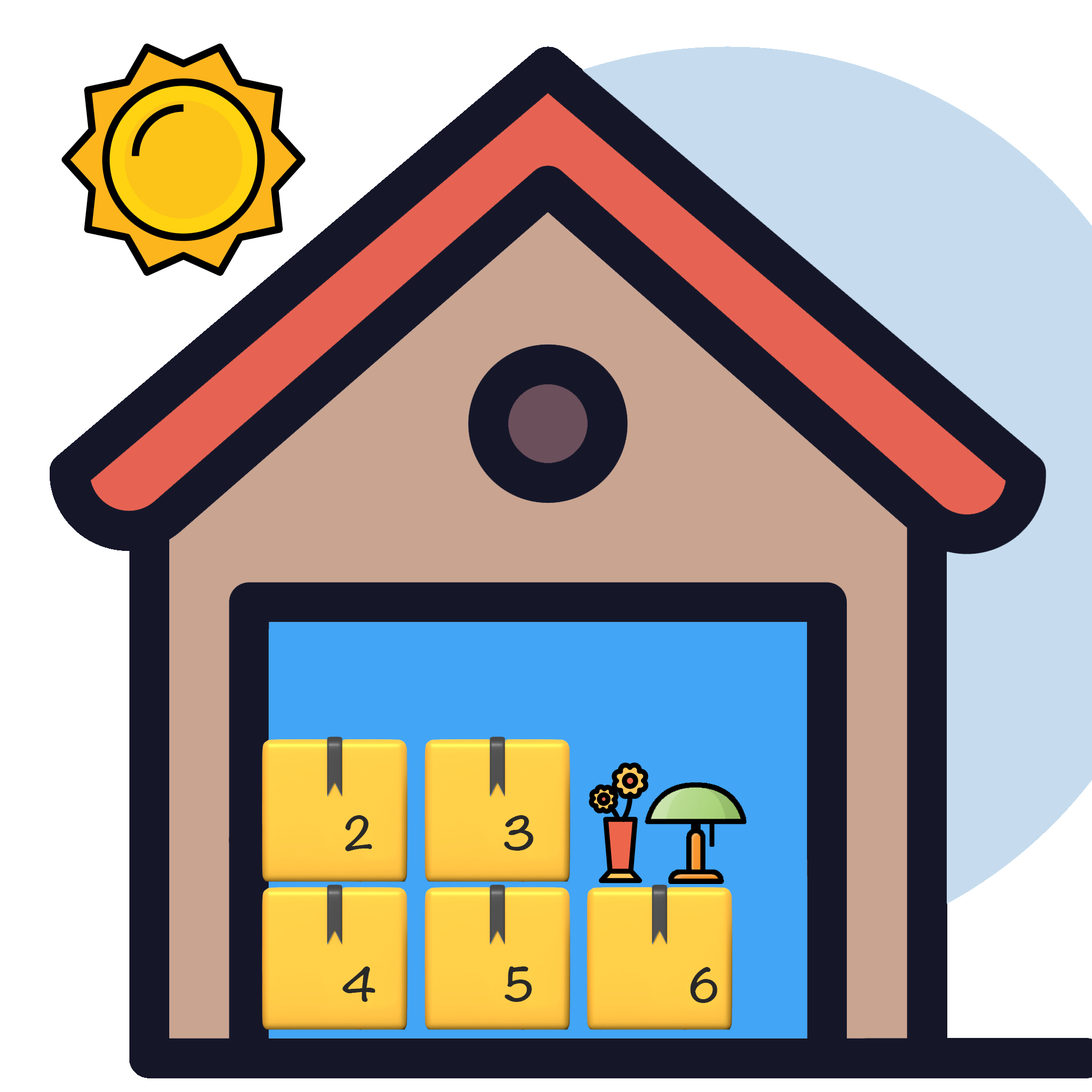
<style>
.page{position:relative;width:1092px;height:1092px;background:#ffffff}
.page>*{position:absolute;margin:0}
.t1{font:40.9px "Noteworthy-Bold";color:#282828;font-variant:small-caps}
</style>
<div class="page">
<p class="t1" style="left:345px;top:815px;width:27px;height:36px">2</p>
<p class="t1" style="left:504px;top:815px;width:29px;height:36px">3</p>
<p class="t1" style="left:342px;top:966px;width:33px;height:36px">4</p>
<p class="t1" style="left:504px;top:966px;width:28px;height:36px">5</p>
<p class="t1" style="left:690px;top:967px;width:27px;height:36px">6</p>
</div>
